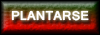
<style>
.page{position:relative;width:100px;height:35px}
.page>*{position:absolute;margin:0}
.t1{font:12px "Kartika-Bold";color:#fffefe}
</style>
<div class="page">
<p class="t1" style="left:11px;top:10px;width:78px;height:11px">PLANTARSE</p>
</div>
